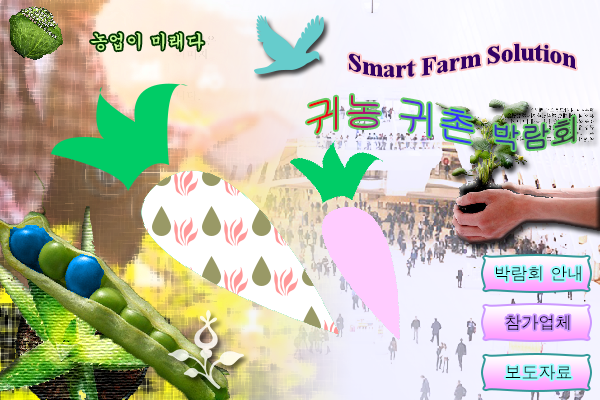
<style>
.page{position:relative;width:600px;height:400px}
.page>*{position:absolute;margin:0}
.t1{font:18px "Gungsuh";color:#ccff99}
.t2{font:25px "TimesNewRomanPS-BoldMT";color:#330066}
.t3{font:40px "Gulim"}
.t4{font:30px "Gulim"}
.t5{font:17px "Dotum";color:#000000}
</style>
<div class="page">
<p class="t1" style="left:91px;top:32px;width:113px;height:19px">농업이 미래다</p>
<p class="t2" style="left:348px;top:43px;width:228px;height:35px">Smart Farm Solution</p>
<p class="t3" style="left:307px;top:95px;width:268px;height:55px">귀농 귀촌 <span class="t4">박람회</span></p>
<p class="t5" style="left:496px;top:266px;width:85px;height:16px">박람회 안내</p>
<p class="t5" style="left:506px;top:315px;width:64px;height:15px">참가업체</p>
<p class="t5" style="left:505px;top:365px;width:67px;height:15px">보도자료</p>
</div>
